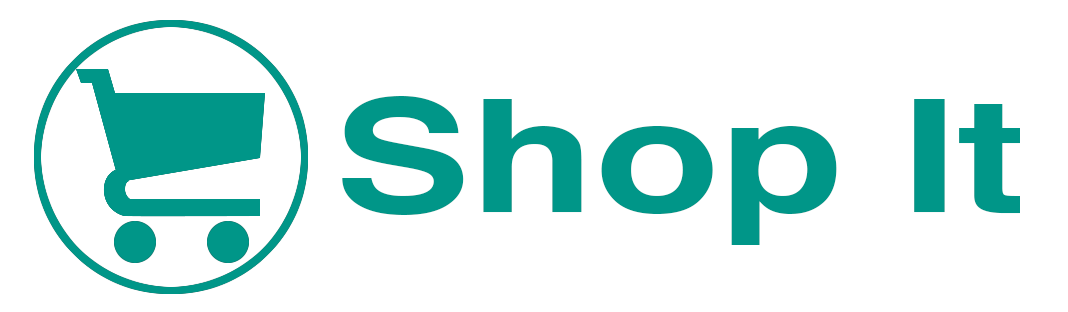
<style>
.page{position:relative;width:1068px;height:312px;background:#ffffff}
.page>*{position:absolute;margin:0}
.t1{font:157px "Helvetica-Bold";color:#009688;scale:1.3 1}
</style>
<div class="page">
<p class="t1" style="left:342px;top:96px;width:678px;height:149px">Shop It</p>
</div>
